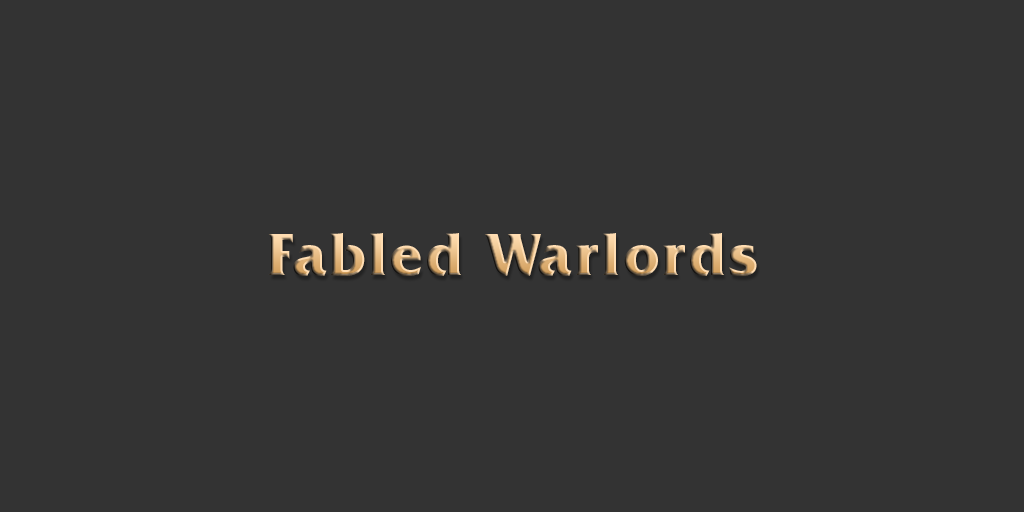
<style>
.page{position:relative;width:1024px;height:512px;background:#333333}
.page>*{position:absolute;margin:0}
.t1{font:60.4px "FrizQuadrataITCbyBT-Bold";letter-spacing:0.05em}
</style>
<div class="page">
<p class="t1" style="left:268px;top:233px;width:489px;height:43px">Fabled Warlords</p>
</div>
